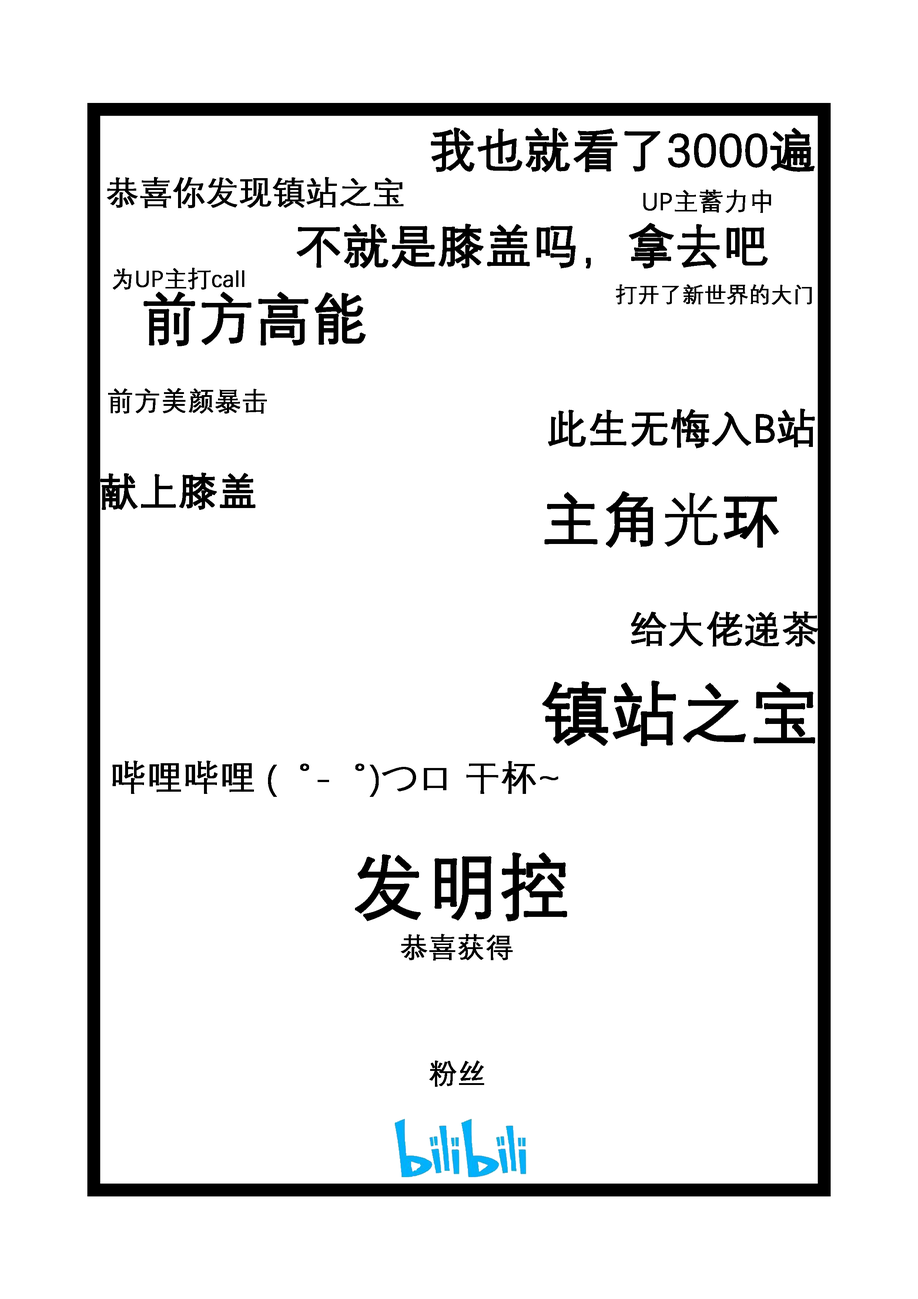
<style>
.page{position:relative;width:918px;height:1299px;background:#ffffff}
.page>*{position:absolute;margin:0}
.t1{font:46.3px "DengXian";color:#000000;font-weight:bold}
.t2{font:32.4px "DengXian";color:#000000;font-weight:bold}
.t3{font:24.7px "DengXian";color:#000000;font-weight:bold}
.t4{font:23.1px "DengXian";color:#000000;font-weight:bold}
.t5{font:55.5px "DengXian";color:#000000;font-weight:bold}
.t6{font:21.6px "DengXian";color:#000000;font-weight:bold}
.t7{font:26.2px "DengXian";color:#000000;font-weight:bold}
.t8{font:40.1px "DengXian";color:#000000;font-weight:bold}
.t9{font:38.6px "DengXian";color:#000000;font-weight:bold}
.t10{font:58.6px "DengXian";color:#000000;font-weight:bold}
.t11{font:37px "DengXian";color:#000000;font-weight:bold}
.t12{font:67.9px "DengXian";color:#000000;font-weight:bold}
.t13{font:35.5px "DengXian";color:#000000;font-weight:bold}
.t14{font:71px "DengXian";color:#000000;font-weight:bold}
.t15{font:27.8px "DengXian";color:#000000;font-weight:bold}
</style>
<div class="page">
<p class="t1" style="left:431px;top:127px;width:384px;height:45px">我也就看了3000遍</p>
<p class="t2" style="left:107px;top:177px;width:297px;height:31px">恭喜你发现镇站之宝</p>
<p class="t3" style="left:643px;top:190px;width:128px;height:23px">UP主蓄力中</p>
<p class="t1" style="left:297px;top:223px;width:471px;height:45px">不就是膝盖吗，拿去吧</p>
<p class="t4" style="left:113px;top:268px;width:131px;height:22px">为UP主打call</p>
<p class="t5" style="left:144px;top:292px;width:222px;height:54px">前方高能</p>
<p class="t6" style="left:616px;top:284px;width:196px;height:21px">打开了新世界的大门</p>
<p class="t7" style="left:108px;top:388px;width:159px;height:26px">前方美颜暴击</p>
<p class="t8" style="left:548px;top:408px;width:267px;height:40px">此生无悔入B站</p>
<p class="t9" style="left:100px;top:472px;width:155px;height:38px">献上膝盖</p>
<p class="t10" style="left:545px;top:491px;width:234px;height:57px">主角光环</p>
<p class="t11" style="left:631px;top:611px;width:188px;height:35px">给大佬递茶</p>
<p class="t12" style="left:542px;top:680px;width:273px;height:66px">镇站之宝</p>
<p class="t13" style="left:113px;top:760px;width:445px;height:37px">哔哩哔哩 (゜-゜)つロ 干杯~</p>
<p class="t14" style="left:355px;top:852px;width:212px;height:69px">发明控</p>
<p class="t15" style="left:401px;top:934px;width:112px;height:26px">恭喜获得</p>
<p class="t15" style="left:429px;top:1060px;width:55px;height:27px">粉丝</p>
</div>
